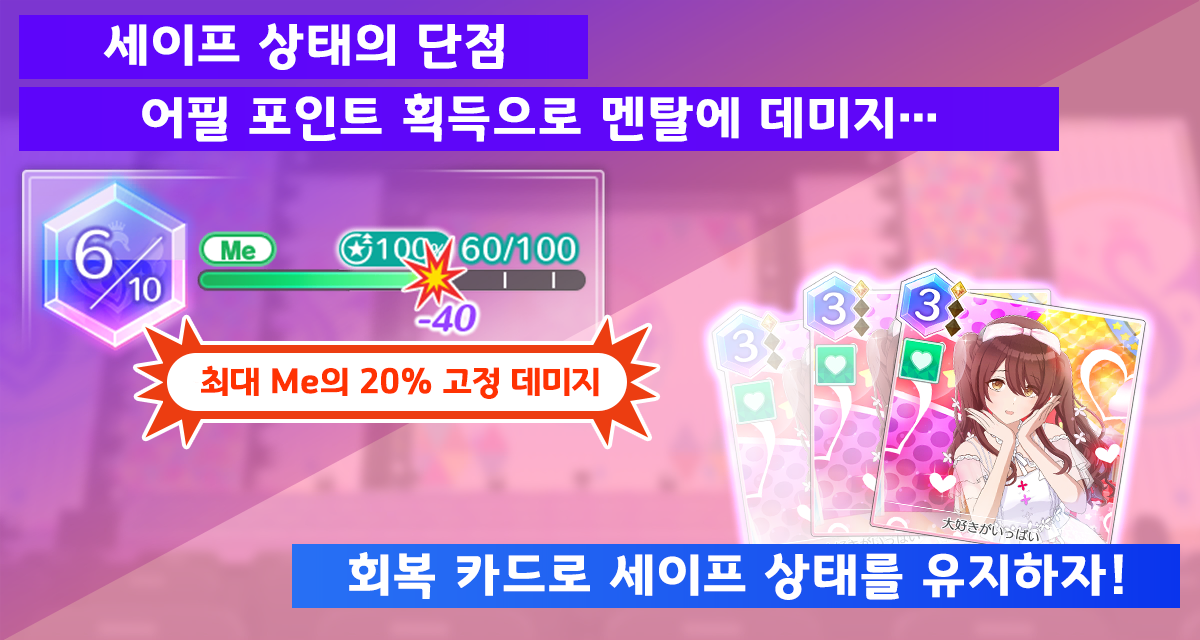
<style>
.page{position:relative;width:1200px;height:640px}
.page>*{position:absolute;margin:0}
.t1{font:50.7px "GyeonggiTitleB";letter-spacing:0.05em;color:#ffffff}
.t2{font:34.7px "GyeonggiTitleB";color:#ff3202}
</style>
<div class="page">
<p class="t1" style="left:103px;top:23px;width:401px;height:47px">세이프 상태의 단점</p>
<p class="t1" style="left:142px;top:93px;width:794px;height:49px">어필 포인트 획득으로 멘탈에 데미지…</p>
<p class="t2" style="left:201px;top:365px;width:398px;height:34px">최대 Me의 20% 고정 데미지</p>
<p class="t1" style="left:349px;top:552px;width:774px;height:48px">회복 카드로 세이프 상태를 유지하자!</p>
</div>
